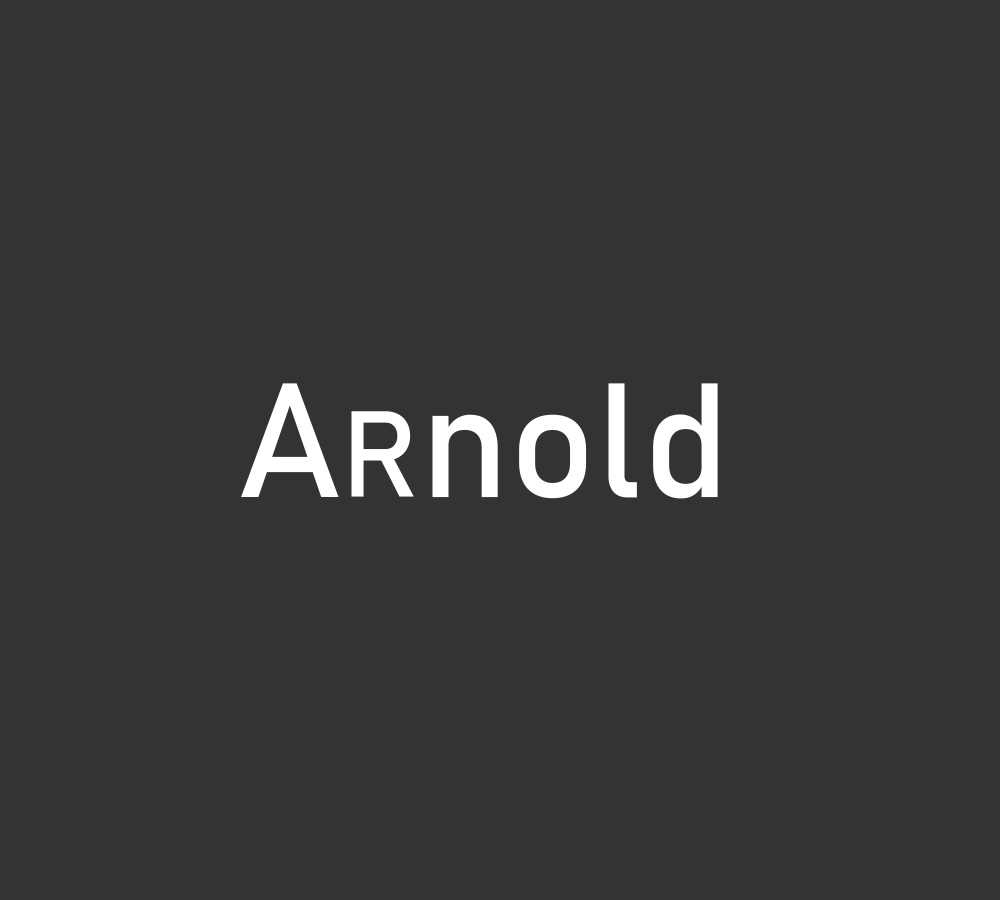
<style>
.page{position:relative;width:1000px;height:900px;background:#333333}
.page>*{position:absolute;margin:0}
.t1{font:160px "Bahnschrift";color:#ffffff}
.t2{font:120px "Bahnschrift";color:#ffffff}
</style>
<div class="page">
<p class="t1" style="left:241px;top:383px;width:477px;height:116px">A<span class="t2">R</span>nold</p>
</div>
